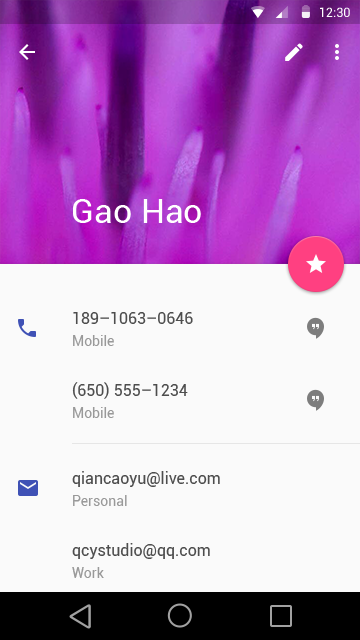
<style>
.page{position:relative;width:360px;height:640px;background:#fafafa}
.page>*{position:absolute;margin:0}
.t1{font:12.7px "Roboto-Regular";color:#ffffff}
.t2{font:34px "Roboto-Regular";color:#ffffff}
.t3{font:16px "Roboto-Regular";color:#4d4d4d}
.t4{font:14px "Roboto-Regular";color:#999999}
</style>
<div class="page">
<p class="t1" style="left:320px;top:7px;width:30px;height:10px">12:30</p>
<p class="t2" style="left:73px;top:199px;width:128px;height:24px">Gao Hao</p>
<p class="t3" style="left:73px;top:312px;width:120px;height:12px">189–1063–0646</p>
<p class="t4" style="left:73px;top:335px;width:41px;height:11px">Mobile</p>
<p class="t3" style="left:72px;top:382px;width:116px;height:17px">(650) 555–1234</p>
<p class="t4" style="left:73px;top:407px;width:41px;height:11px">Mobile</p>
<p class="t3" style="left:72px;top:471px;width:148px;height:16px">qiancaoyu@live.com</p>
<p class="t4" style="left:73px;top:495px;width:54px;height:11px">Personal</p>
<p class="t3" style="left:72px;top:543px;width:138px;height:16px">qcystudio@qq.com</p>
<p class="t4" style="left:72px;top:567px;width:32px;height:11px">Work</p>
</div>
